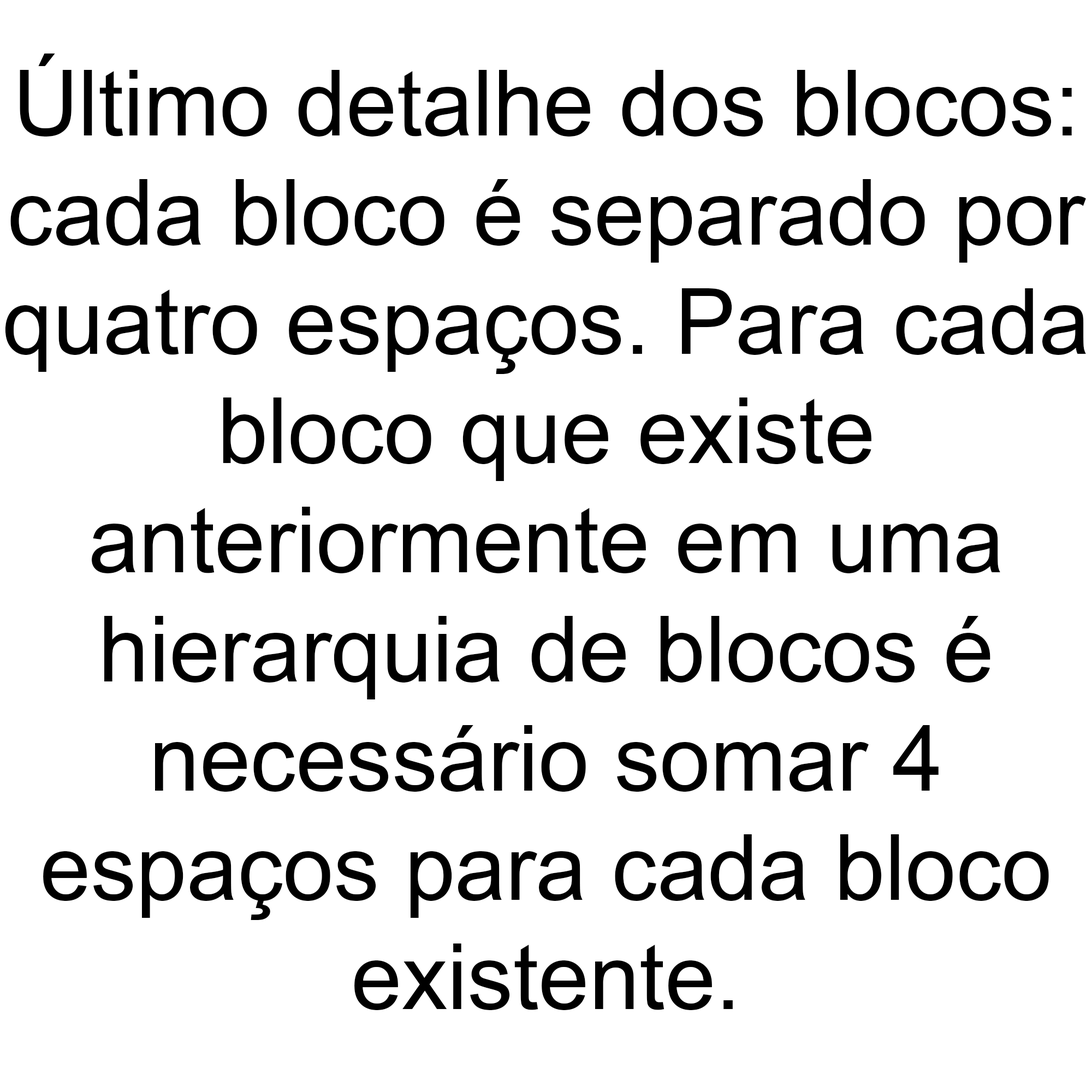
<style>
.page{position:relative;width:1092px;height:1092px;background:#ffffff}
.page>*{position:absolute;margin:0}
.t1{font:91px "ArialMT";color:#000000}
</style>
<div class="page">
<p class="t1" style="left:5px;top:54px;width:1081px;height:956px;text-align:center">Último detalhe dos blocos:<br>cada bloco é separado por<br>quatro espaços. Para cada<br>bloco que existe<br>anteriormente em uma<br>hierarquia de blocos é<br>necessário somar 4<br>espaços para cada bloco<br>existente.</p>
</div>
